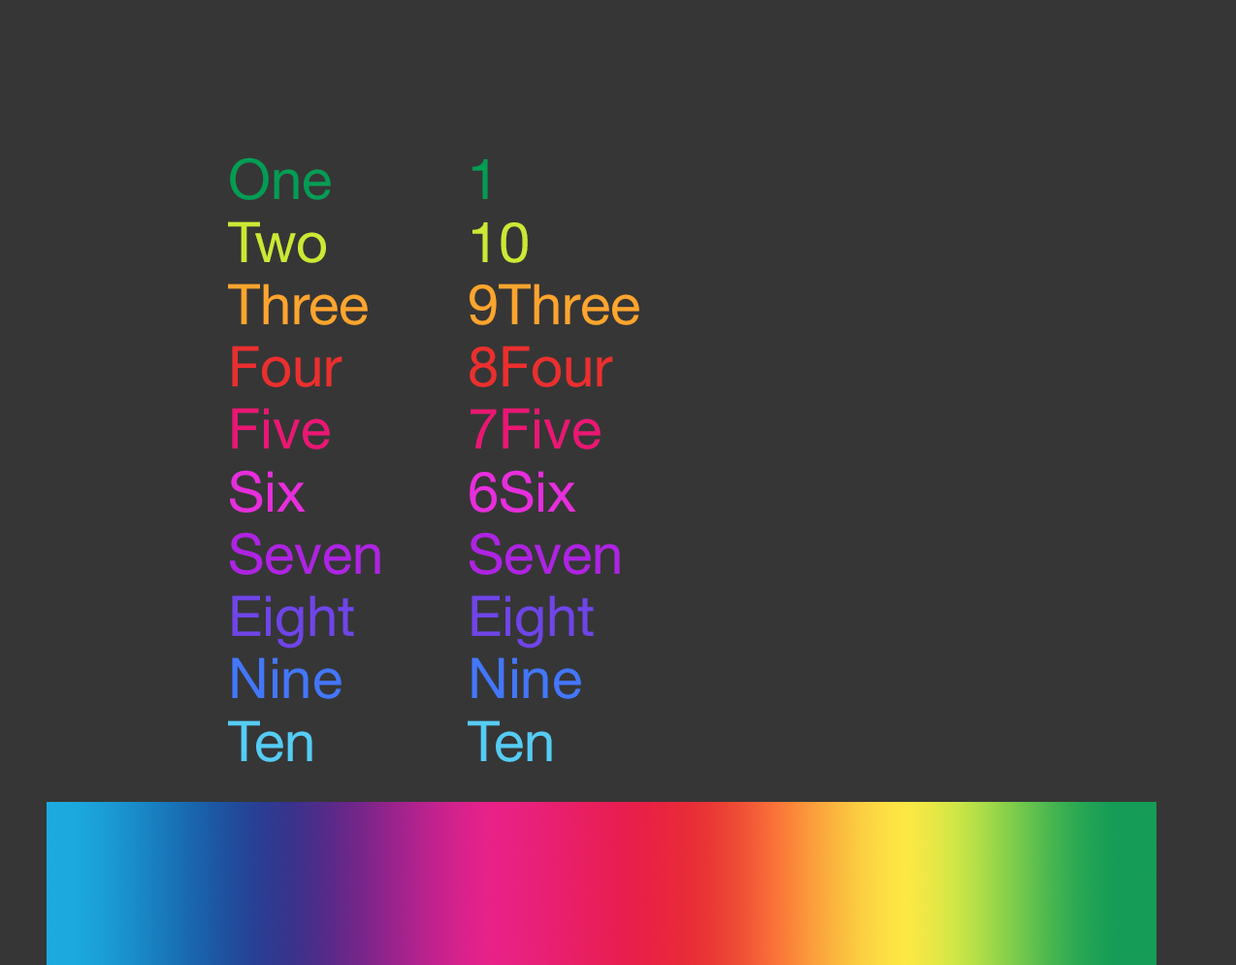
<style>
.page{position:relative;width:1236px;height:965px;background:#363636}
.page>*{position:absolute;margin:0}
.t1{font:56.1px/39.9px "HelveticaNeueLTStd-Roman";color:#fda52d}
.t2{font:56.1px/39.9px "HelveticaNeueLTStd-Roman";color:#009e54}
.t3{font:56.1px/39.9px "HelveticaNeueLTStd-Roman";color:#cce834}
.t4{font:56.1px/39.9px "HelveticaNeueLTStd-Roman";color:#eb2f2e}
.t5{font:56.1px/39.9px "HelveticaNeueLTStd-Roman";color:#eb1674}
.t6{font:56.1px/39.9px "HelveticaNeueLTStd-Roman";color:#e72edc}
.t7{font:56.1px/39.9px "HelveticaNeueLTStd-Roman";color:#af23e3}
.t8{font:56.1px/39.9px "HelveticaNeueLTStd-Roman";color:#6f45e8}
.t9{font:56.1px/39.9px "HelveticaNeueLTStd-Roman";color:#4377f9}
.t10{font:56.1px/39.9px "HelveticaNeueLTStd-Roman";color:#55ccf4}
</style>
<div class="page">
<p class="t1" style="left:228px;top:157px;width:152px;height:605px"><span class="t2">One<br></span><span class="t3">Two<br></span>Three<br><span class="t4">Four<br></span><span class="t5">Five<br></span><span class="t6">Six<br></span><span class="t7">Seven<br></span><span class="t8">Eight<br></span><span class="t9">Nine<br></span><span class="t10">Ten</span></p>
<p class="t1" style="left:468px;top:159px;width:171px;height:603px"><span class="t2">1<br></span><span class="t3">10<br></span>9Three<br><span class="t4">8Four<br></span><span class="t5">7Five<br></span><span class="t6">6Six<br></span><span class="t7">Seven<br></span><span class="t8">Eight<br></span><span class="t9">Nine<br></span><span class="t10">Ten</span></p>
</div>
